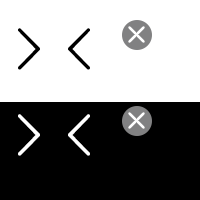
<style>
.page{position:relative;width:200px;height:200px;background:#ffffff}
.page>*{position:absolute;margin:0}
.t1{font:48px "fleches-droite-gauche";letter-spacing:0.05em;color:#000000}
.t2{font:48px "fleches-droite-gauche";letter-spacing:0.05em;color:#ffffff}
</style>
<div class="page">
<p class="t1" style="left:18px;top:28px;width:72px;height:42px">IJ</p>
<p class="t2" style="left:18px;top:114px;width:72px;height:42px">IJ</p>
</div>
